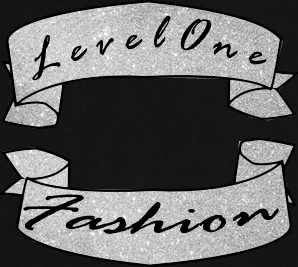
<style>
.page{position:relative;width:298px;height:267px}
.page>*{position:absolute;margin:0}
.t1{font:53.1px "RageItalic";color:#000000;scale:0.8 1}
.t2{font:53.1px "RageItalic";color:#000000;scale:1.46 1}
</style>
<div class="page">
<p class="t1" style="left:32px;top:15px;width:235px;height:66px;rotate:-3deg">L e v e l O n e</p>
<p class="t2" style="left:23px;top:194px;width:256px;height:40px">Fashion</p>
</div>
